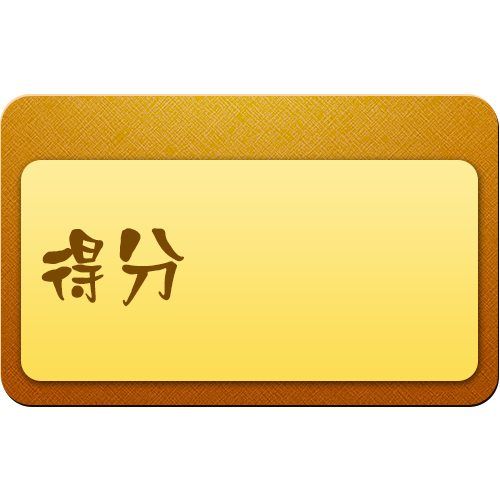
<style>
.page{position:relative;width:500px;height:500px;background:#ffffff}
.page>*{position:absolute;margin:0}
.t1{font:90px "¾­µä·±¹ã¸æ Regular";color:#794901}
</style>
<div class="page">
<p class="t1" style="left:41px;top:228px;width:144px;height:79px">得分</p>
</div>
